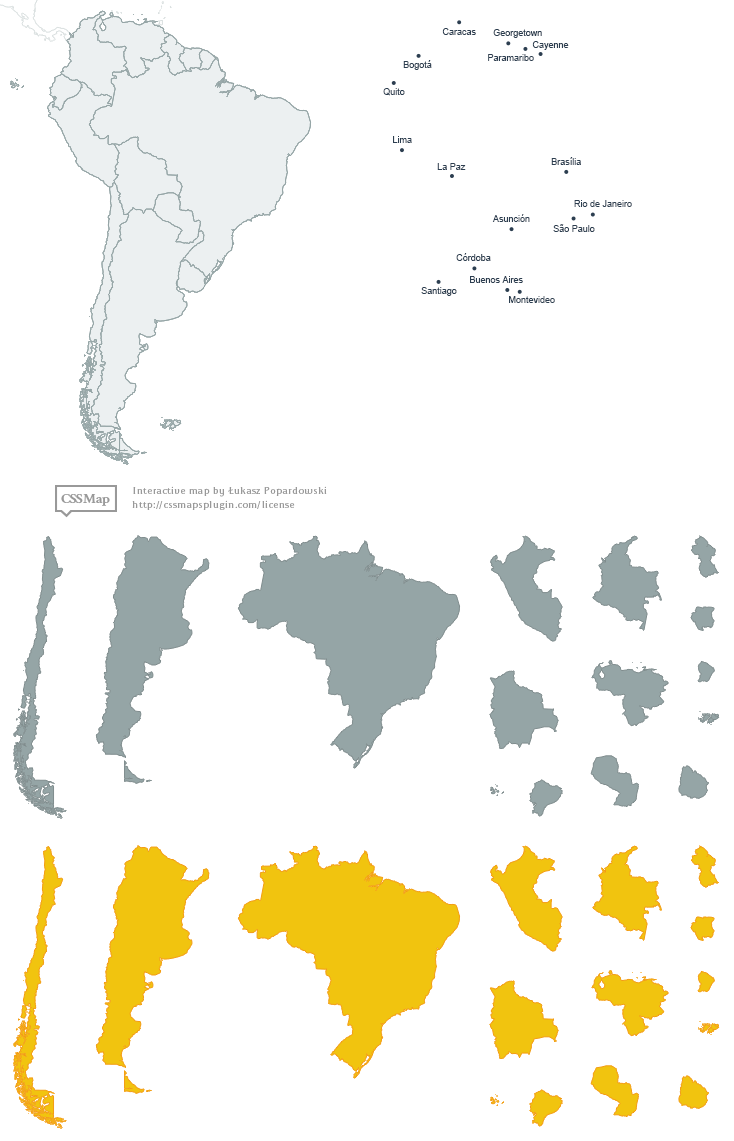
<style>
.page{position:relative;width:734px;height:1141px;background:#ffffff}
.page>*{position:absolute;margin:0}
.t1{font:9px "ArialMT";color:#2c3e50}
</style>
<div class="page">
<p class="t1" style="left:442px;top:28px;width:34px;height:7px">Caracas</p>
<p class="t1" style="left:493px;top:29px;width:49px;height:9px">Georgetown</p>
<p class="t1" style="left:532px;top:41px;width:37px;height:9px">Cayenne</p>
<p class="t1" style="left:488px;top:54px;width:46px;height:7px">Paramaribo</p>
<p class="t1" style="left:403px;top:60px;width:29px;height:10px">Bogotá</p>
<p class="t1" style="left:383px;top:88px;width:22px;height:8px">Quito</p>
<p class="t1" style="left:393px;top:136px;width:19px;height:7px">Lima</p>
<p class="t1" style="left:551px;top:157px;width:30px;height:8px">Brasília</p>
<p class="t1" style="left:437px;top:163px;width:29px;height:7px">La Paz</p>
<p class="t1" style="left:574px;top:200px;width:58px;height:7px">Rio de Janeiro</p>
<p class="t1" style="left:492px;top:214px;width:38px;height:8px">Asunción</p>
<p class="t1" style="left:553px;top:224px;width:42px;height:8px">São Paulo</p>
<p class="t1" style="left:456px;top:253px;width:35px;height:8px">Córdoba</p>
<p class="t1" style="left:470px;top:276px;width:53px;height:7px">Buenos Aires</p>
<p class="t1" style="left:421px;top:287px;width:36px;height:9px">Santiago</p>
<p class="t1" style="left:509px;top:296px;width:46px;height:7px">Montevideo</p>
</div>
